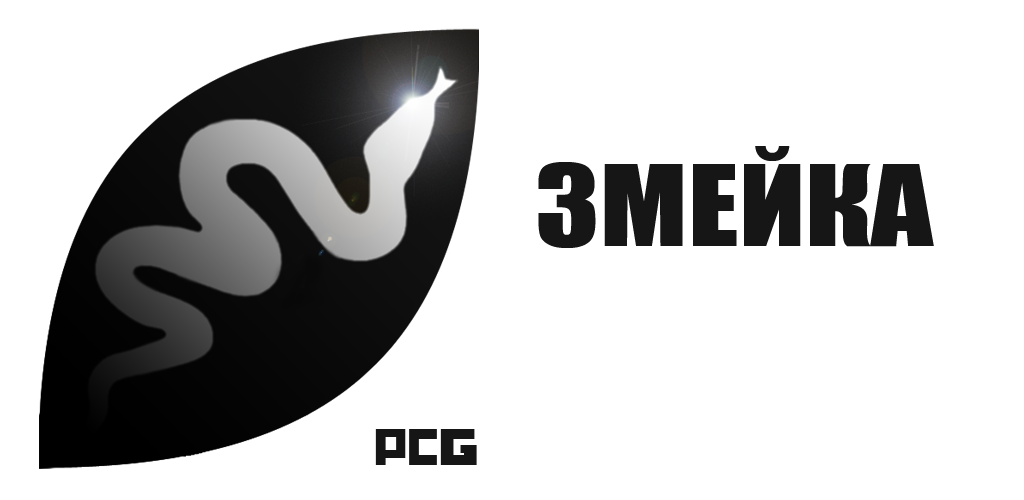
<style>
.page{position:relative;width:1024px;height:500px;background:#ffffff}
.page>*{position:absolute;margin:0}
.t1{font:104.2px "Impact";color:#161616;scale:1.18 1}
.t2{font:48px "HungerGames";color:#161616}
</style>
<div class="page">
<p class="t1" style="left:538px;top:146px;width:396px;height:102px">ЗМЕЙКА</p>
<p class="t2" style="left:375px;top:429px;width:102px;height:36px">PCG</p>
</div>
